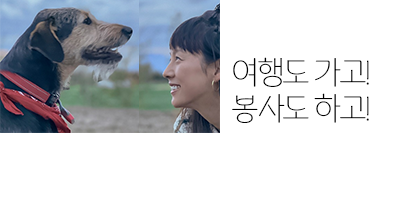
<style>
.page{position:relative;width:400px;height:200px;background:#ffffff}
.page>*{position:absolute;margin:0}
.t1{font:30px "TAEBAEK-milkyway";letter-spacing:-0.06em;color:#000000}
</style>
<div class="page">
<p class="t1" style="left:232px;top:57px;width:137px;height:66px">여행도 가고!<br>봉사도 하고!</p>
</div>
